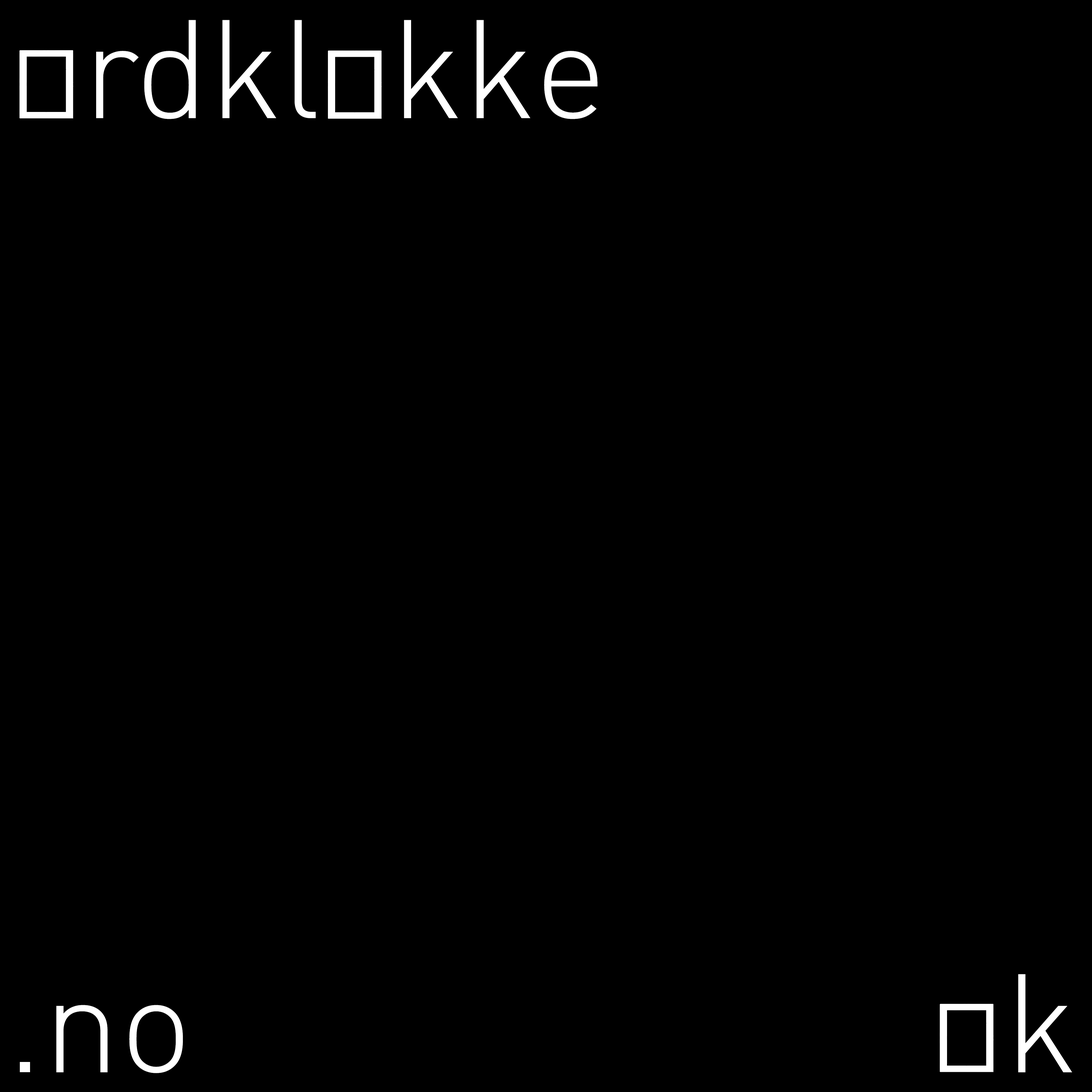
<style>
.page{position:relative;width:1092px;height:1092px;background:#000000}
.page>*{position:absolute;margin:0}
.t1{font:137.6px "DINPro-Light";color:#ffffff}
</style>
<div class="page">
<p class="t1" style="left:20px;top:20px;width:578px;height:99px">ordklokke</p>
<p class="t1" style="left:1018px;top:974px;width:54px;height:99px">k</p>
<p class="t1" style="left:20px;top:1005px;width:163px;height:68px">.no</p>
</div>
